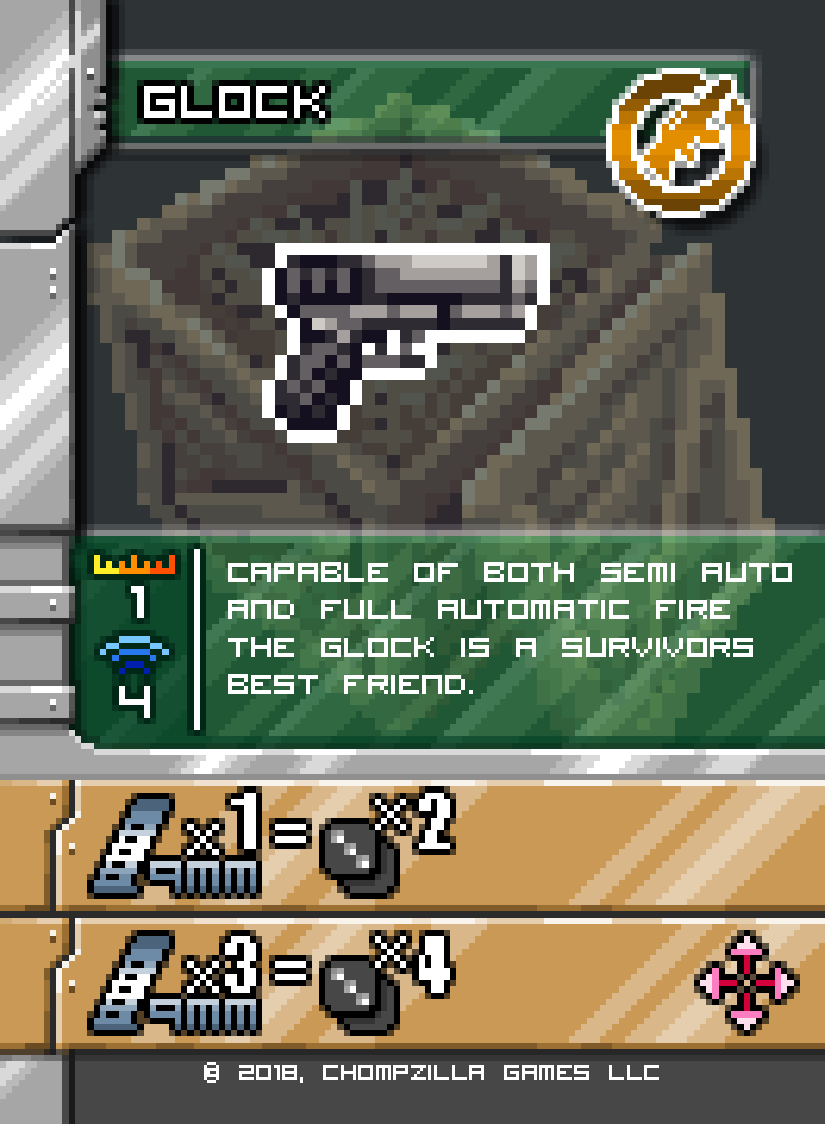
<style>
.page{position:relative;width:825px;height:1125px}
.page>*{position:absolute;margin:0}
.t1{font:50px/37.5px "VisitorTT2BRK";color:#ffffff}
.t2{font:37.5px "VisitorTT2BRK";color:#ffffff}
</style>
<div class="page">
<p class="t1" style="left:228px;top:562px;width:564px;height:132px">Capable of both semi auto<br>and full automatic fire<br>the glock is a survivors <br>best friend.</p>
<p class="t2" style="left:204px;top:1062px;width:455px;height:21px">© 2018, Chompzilla Games LLC</p>
</div>
